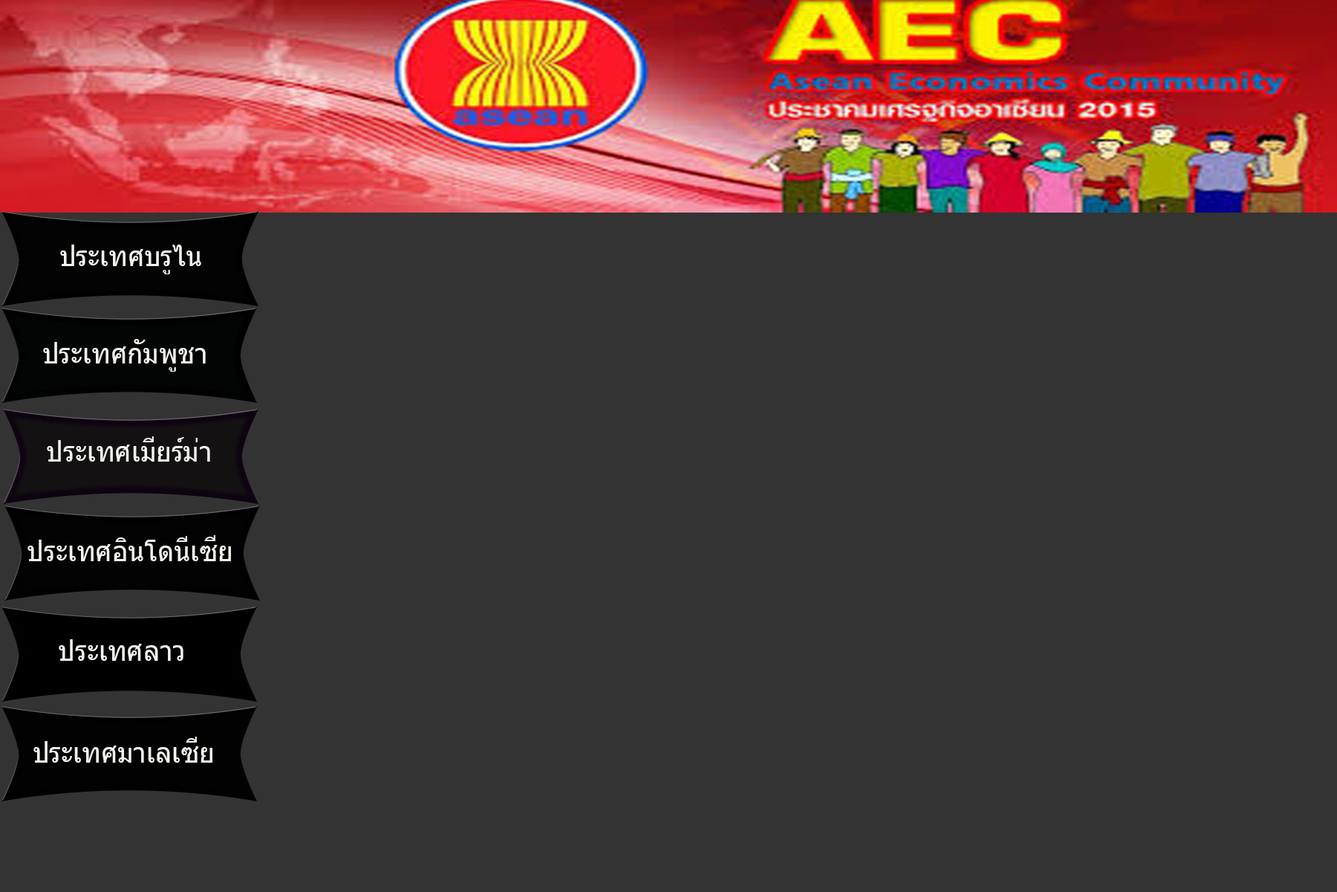
<style>
.page{position:relative;width:1337px;height:892px;background:#333333}
.page>*{position:absolute;margin:0}
.t1{font:26.8px "Tahoma";color:#f2f4ed}
</style>
<div class="page">
<p class="t1" style="left:60px;top:244px;width:141px;height:30px">ประเทศบรูไน</p>
<p class="t1" style="left:43px;top:339px;width:163px;height:33px">ประเทศกัมพูชา</p>
<p class="t1" style="left:47px;top:436px;width:163px;height:25px">ประเทศเมียร์ม่า</p>
<p class="t1" style="left:27px;top:535px;width:204px;height:26px">ประเทศอินโดนีเซีย</p>
<p class="t1" style="left:59px;top:639px;width:125px;height:22px">ประเทศลาว</p>
<p class="t1" style="left:33px;top:736px;width:179px;height:26px">ประเทศมาเลเซีย</p>
</div>
